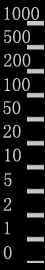
<style>
.page{position:relative;width:45px;height:270px;background:#000000}
.page>*{position:absolute;margin:0}
.t1{font:18.7px "NSimSun";color:#c6c6c6}
</style>
<div class="page">
<p class="t1" style="left:4px;top:7px;width:35px;height:13px">1000</p>
<p class="t1" style="left:4px;top:30px;width:26px;height:13px">500</p>
<p class="t1" style="left:4px;top:53px;width:27px;height:14px">200</p>
<p class="t1" style="left:4px;top:78px;width:26px;height:13px">100</p>
<p class="t1" style="left:3px;top:101px;width:18px;height:14px">50</p>
<p class="t1" style="left:3px;top:124px;width:18px;height:14px">20</p>
<p class="t1" style="left:5px;top:148px;width:16px;height:14px">10</p>
<p class="t1" style="left:4px;top:173px;width:8px;height:14px">5</p>
<p class="t1" style="left:3px;top:198px;width:9px;height:13px">2</p>
<p class="t1" style="left:4px;top:221px;width:7px;height:14px">1</p>
<p class="t1" style="left:3px;top:246px;width:9px;height:13px">0</p>
</div>
